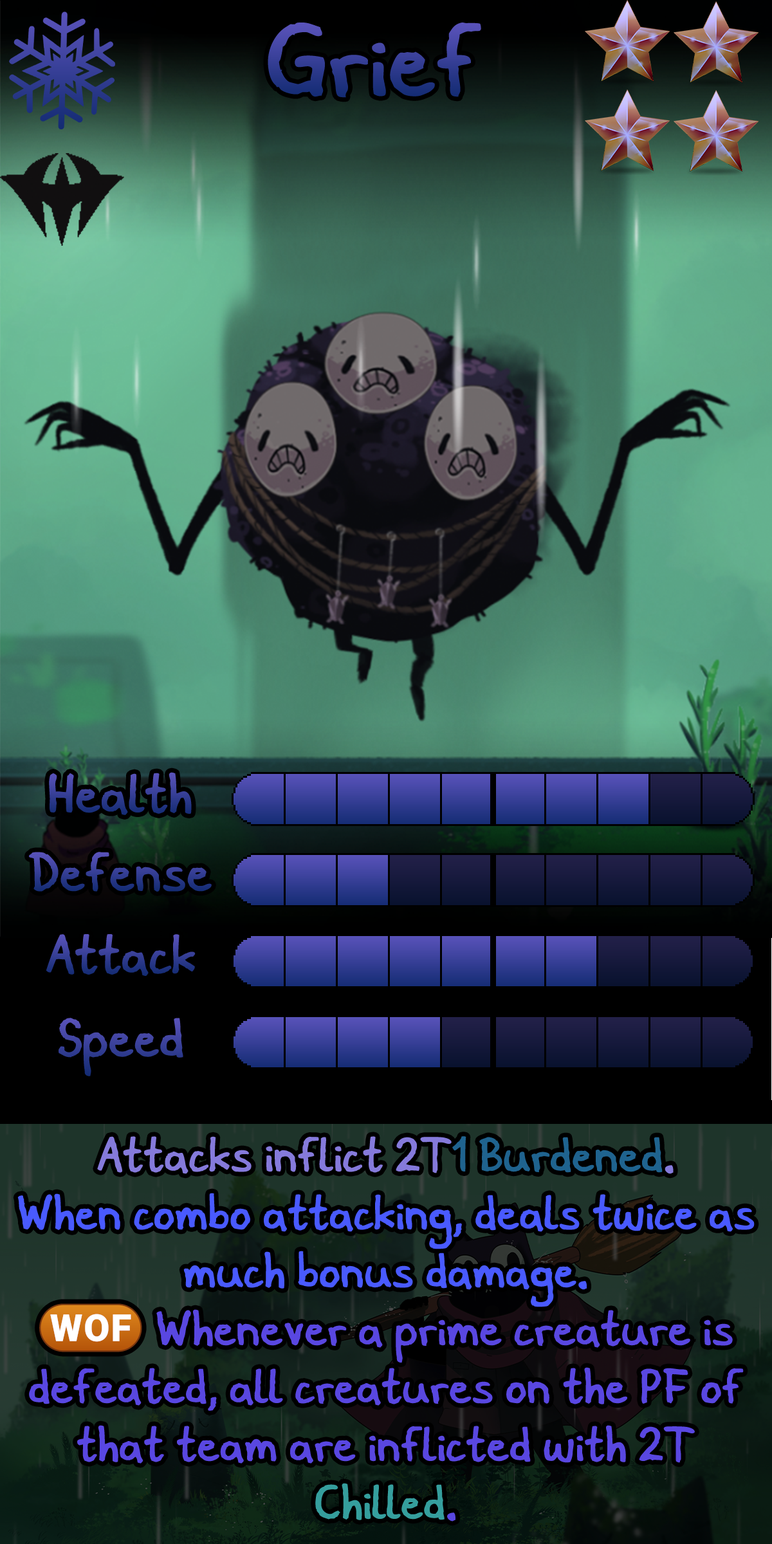
<style>
.page{position:relative;width:772px;height:1544px}
.page>*{position:absolute;margin:0}
.t1{font:174.4px "Domigorgon"}
.t2{font:92.7px "Domigorgon"}
.t3{font:92.7px "Domigorgon";color:#3b419b}
.t4{font:82.4px/57.9px "Domigorgon";color:#5947e1}
.t5{font:82.4px/57.9px "Domigorgon";color:#857adb}
.t6{font:82.4px/57.9px "Domigorgon";color:#1f638f}
.t7{font:82.4px/19.3px "Domigorgon";color:#1f638f}
.t8{font:82.4px/57.9px "Domigorgon";color:#495aff}
.t9{font:84.5px/57.9px "stoogedings-Regular";color:#5947e1}
.t10{font:82.4px/19.3px "Domigorgon";color:#359e9d}
</style>
<div class="page">
<p class="t1" style="left:268px;top:23px;width:213px;height:75px">Grief</p>
<p class="t2" style="left:49px;top:772px;width:143px;height:43px">Health</p>
<p class="t2" style="left:29px;top:852px;width:183px;height:40px">Defense</p>
<p class="t2" style="left:46px;top:934px;width:150px;height:42px">Attack</p>
<p class="t3" style="left:59px;top:1018px;width:124px;height:59px">Speed</p>
<p class="t4" style="left:17px;top:1136px;width:738px;height:386px;text-align:center"><span class="t5">Attacks inflict 2T</span><span class="t6">1 </span><span class="t7">Burdened</span><span class="t5">.<br></span><span class="t8">When combo attacking, deals twice as much bonus damage.<br></span><span class="t9">(WOF)</span> Whenever a prime creature is defeated, all creatures on the PF of that team are inflicted with 2T <span class="t10">Chilled</span>.</p>
</div>
